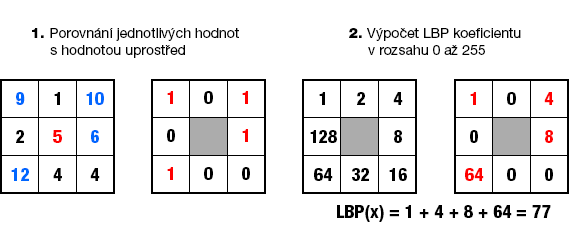
<style>
.page{position:relative;width:570px;height:229px;background:#ffffff}
.page>*{position:absolute;margin:0}
.t1{font:14px "HelveticaNeueLTPro-Roman";color:#000000}
.t2{font:14px "HelveticaNeueLTPro-Blk";color:#000000}
.t3{font:18px/38px "HelveticaNeueLTPro-HvCn";color:#000000}
.t4{font:18px/38px "HelveticaNeueLTPro-HvCn";color:#0066ff}
.t5{font:18px/38px "HelveticaNeueLTPro-HvCn";color:#fe0000}
.t6{font:18px/38px "HelveticaNeueLTPro-HvCn";color:#ff0000}
.t7{font:18px "HelveticaNeueLTPro-HvCn";color:#000000}
</style>
<div class="page">
<p class="t1" style="left:32px;top:28px;width:207px;height:30px"><span class="t2">1. </span>Porovnání jednotlivých hodnot<br>     s hodnotou uprostřed</p>
<p class="t1" style="left:349px;top:28px;width:172px;height:27px"><span class="t2">2. </span>Výpočet LBP koeficientu<br>     v rozsahu 0 až 255</p>
<p class="t3" style="left:11px;top:92px;width:93px;height:89px"><span class="t4">9</span>      1     <span class="t4">10<br></span>  2      <span class="t5">5      </span><span class="t4">6<br> 12 </span>    4      4</p>
<p class="t3" style="left:167px;top:91px;width:83px;height:89px"><span class="t5">1</span>      0      <span class="t6">1<br></span>  0              <span class="t6">1<br>  1</span>      0      0</p>
<p class="t3" style="left:310px;top:92px;width:97px;height:89px">1      2      4<br>128            8<br> 64    32    16</p>
<p class="t3" style="left:465px;top:92px;width:89px;height:89px"><span class="t5">1</span>      0      <span class="t6">4<br></span>  0              <span class="t6">8<br> 64</span>     0      0</p>
<p class="t7" style="left:337px;top:205px;width:214px;height:17px">LBP(x) = 1 + 4 + 8 + 64 = 77</p>
</div>
